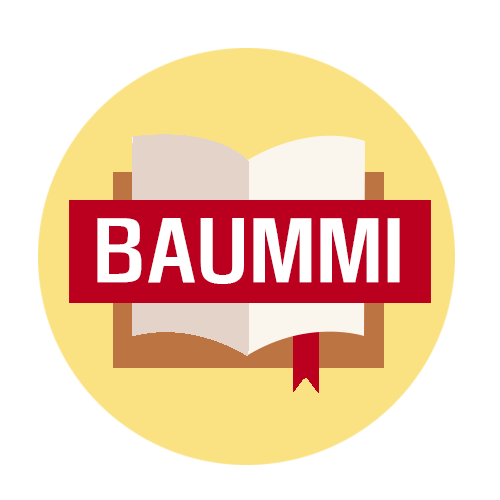
<style>
.page{position:relative;width:500px;height:500px;background:#ffffff}
.page>*{position:absolute;margin:0}
.t1{font:75.6px "H2hdrM";color:#ffffff;scale:1.12 1}
</style>
<div class="page">
<p class="t1" style="left:97px;top:218px;width:303px;height:66px">BAUMMI</p>
</div>
